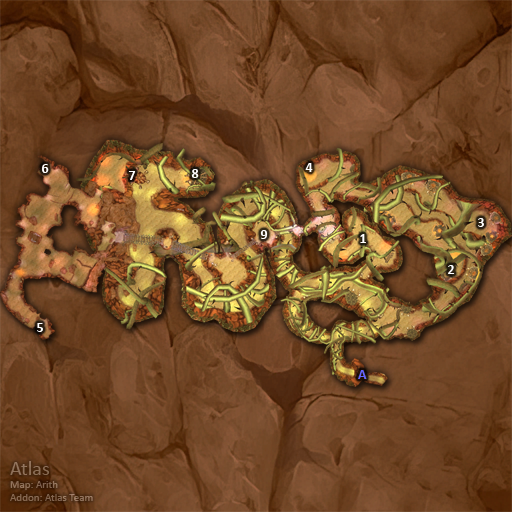
<style>
.page{position:relative;width:512px;height:512px}
.page>*{position:absolute;margin:0}
.t1{font:14px "Calibri-Bold";color:#ffffff}
.t2{font:14px "Calibri-Bold";color:#6666ff}
</style>
<div class="page">
<p class="t1" style="left:42px;top:164px;width:7px;height:9px">6</p>
<p class="t1" style="left:128px;top:171px;width:8px;height:9px">7</p>
<p class="t1" style="left:191px;top:169px;width:8px;height:9px">8</p>
<p class="t1" style="left:305px;top:163px;width:8px;height:9px">4</p>
<p class="t1" style="left:478px;top:218px;width:6px;height:9px">3</p>
<p class="t1" style="left:260px;top:230px;width:8px;height:9px">9</p>
<p class="t1" style="left:360px;top:234px;width:6px;height:9px">1</p>
<p class="t1" style="left:448px;top:265px;width:7px;height:9px">2</p>
<p class="t1" style="left:37px;top:323px;width:6px;height:9px">5</p>
<p class="t2" style="left:358px;top:370px;width:9px;height:9px">A</p>
</div>
